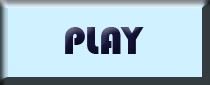
<style>
.page{position:relative;width:210px;height:85px;background:#d0f1ff}
.page>*{position:absolute;margin:0}
.t1{font:40px "Bauhaus93";color:#15133b}
</style>
<div class="page">
<p class="t1" style="left:65px;top:27px;width:79px;height:27px">PLAY</p>
</div>
